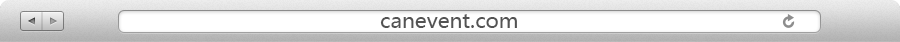
<style>
.page{position:relative;width:900px;height:42px;background:#ffffff}
.page>*{position:absolute;margin:0}
.t1{font:20.9px "MicrosoftYaHei";color:#535353}
</style>
<div class="page">
<p class="t1" style="left:380px;top:14px;width:137px;height:14px">canevent.com</p>
</div>
